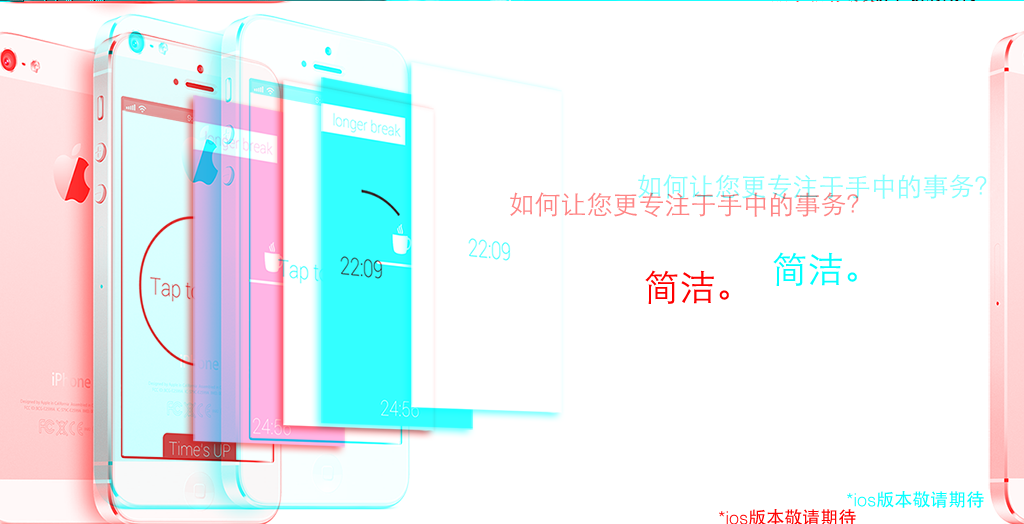
<style>
.page{position:relative;width:1024px;height:524px;background:#ffffff}
.page>*{position:absolute;margin:0}
.t1{font:26px "STXihei"}
.t2{font:36px "STXihei"}
.t3{font:18px "AdobeHeitiStd-Regular"}
.t4{font:18px "Helvetica-Light"}
</style>
<div class="page">
<p class="t1" style="left:638px;top:173px;width:349px;height:25px">如何让您更专注于手中的事务？</p>
<p class="t2" style="left:773px;top:251px;width:84px;height:34px">简洁。</p>
<p class="t3" style="left:847px;top:490px;width:137px;height:17px"><span class="t4">*ios</span>版本敬请期待</p>
</div>
